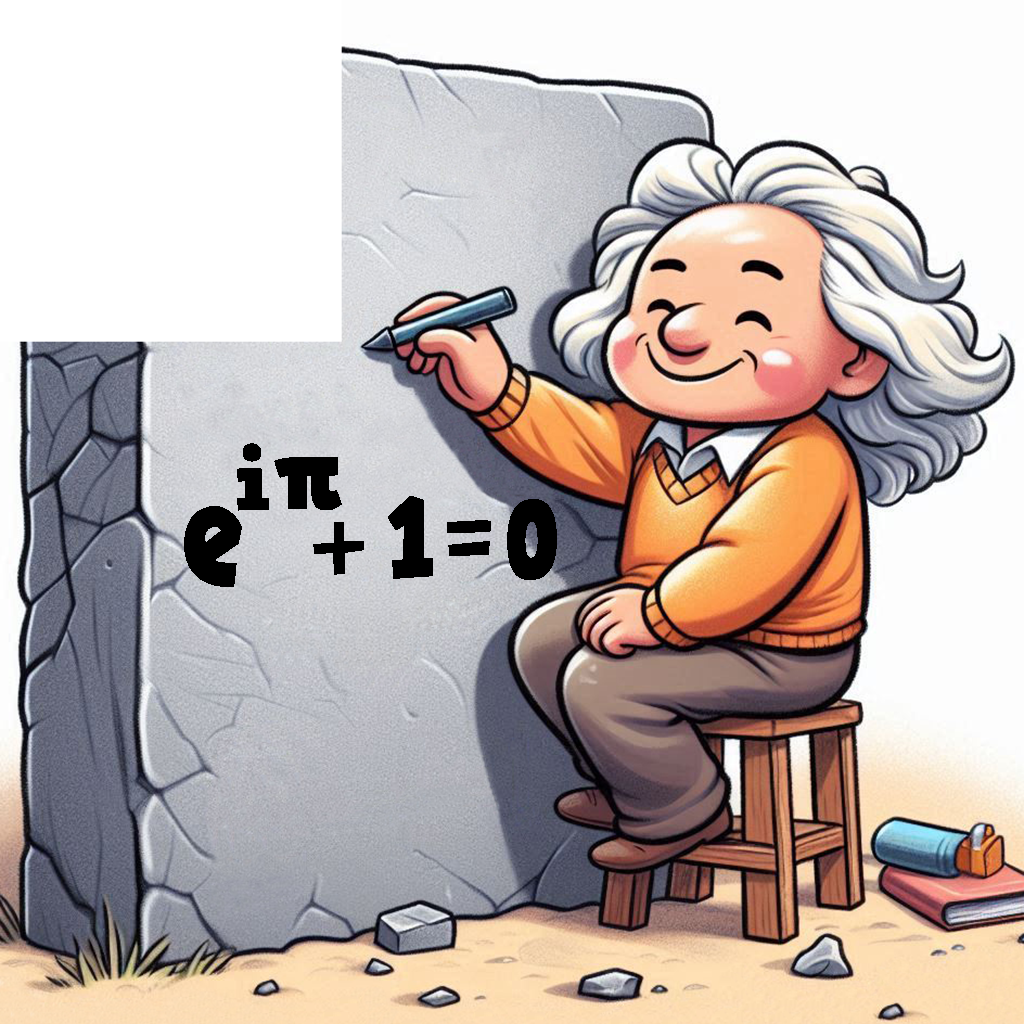
<style>
.page{position:relative;width:1024px;height:1024px}
.page>*{position:absolute;margin:0}
.t1{font:86.8px "HVDComicSerifPro";color:#000000}
.t2{font:101.2px "HVDComicSerifPro";color:#000000}
.t3{font:111.4px "HVDComicSerifPro";color:#000000;scale:0.91 1}
.t4{font:151.9px "HVDComicSerifPro";color:#000000;scale:0.8 1}
.t5{font:111.4px "HVDComicSerifPro";color:#000000;scale:0.82 1}
.t6{font:91.1px "HVDComicSerifPro";color:#000000}
</style>
<div class="page">
<p class="t1" style="left:237px;top:443px;width:105px;height:68px">i<span class="t2">π</span></p>
<p class="t3" style="left:388px;top:496px;width:45px;height:83px">1</p>
<p class="t4" style="left:184px;top:506px;width:58px;height:81px">e</p>
<p class="t5" style="left:507px;top:499px;width:50px;height:81px">0</p>
<p class="t3" style="left:447px;top:520px;width:44px;height:36px">=</p>
<p class="t6" style="left:313px;top:522px;width:51px;height:53px">+</p>
</div>
